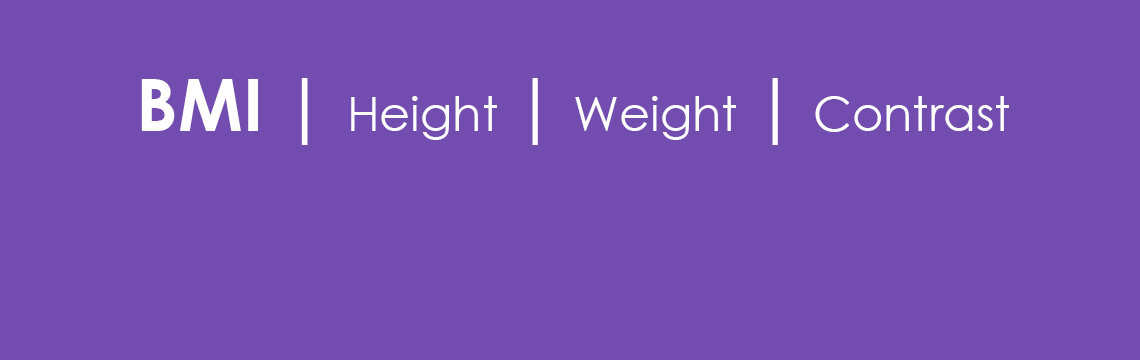
<style>
.page{position:relative;width:1140px;height:360px;background:#724cae}
.page>*{position:absolute;margin:0}
.t1{font:48px "CenturyGothic";color:#ffffff}
.t2{font:72px "CenturyGothic-Bold";color:#ffffff}
.t3{font:72px "CenturyGothic";color:#ffffff}
</style>
<div class="page">
<p class="t1" style="left:141px;top:78px;width:868px;height:67px"><span class="t2">BMI | </span>Height <span class="t3">|</span> Weight <span class="t3">|</span> Contrast</p>
</div>
